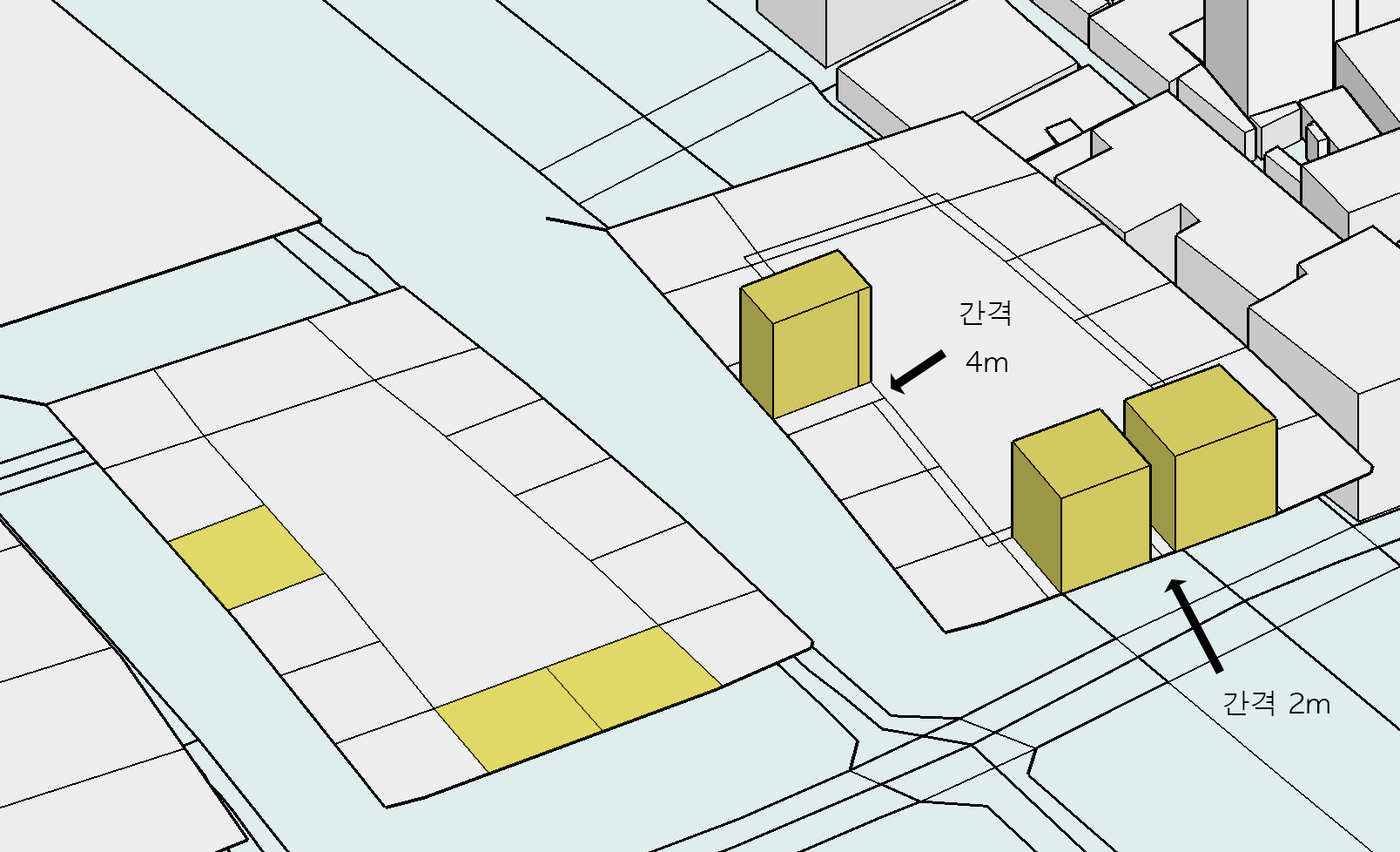
<style>
.page{position:relative;width:1400px;height:852px;background:#dfeded}
.page>*{position:absolute;margin:0}
.t1{font:27.9px "AppleGothic";color:#000000}
</style>
<div class="page">
<p class="t1" style="left:960px;top:300px;width:50px;height:72px;text-align:center">간격<br>4m</p>
<p class="t1" style="left:1223px;top:691px;width:107px;height:25px">간격 2m</p>
</div>
